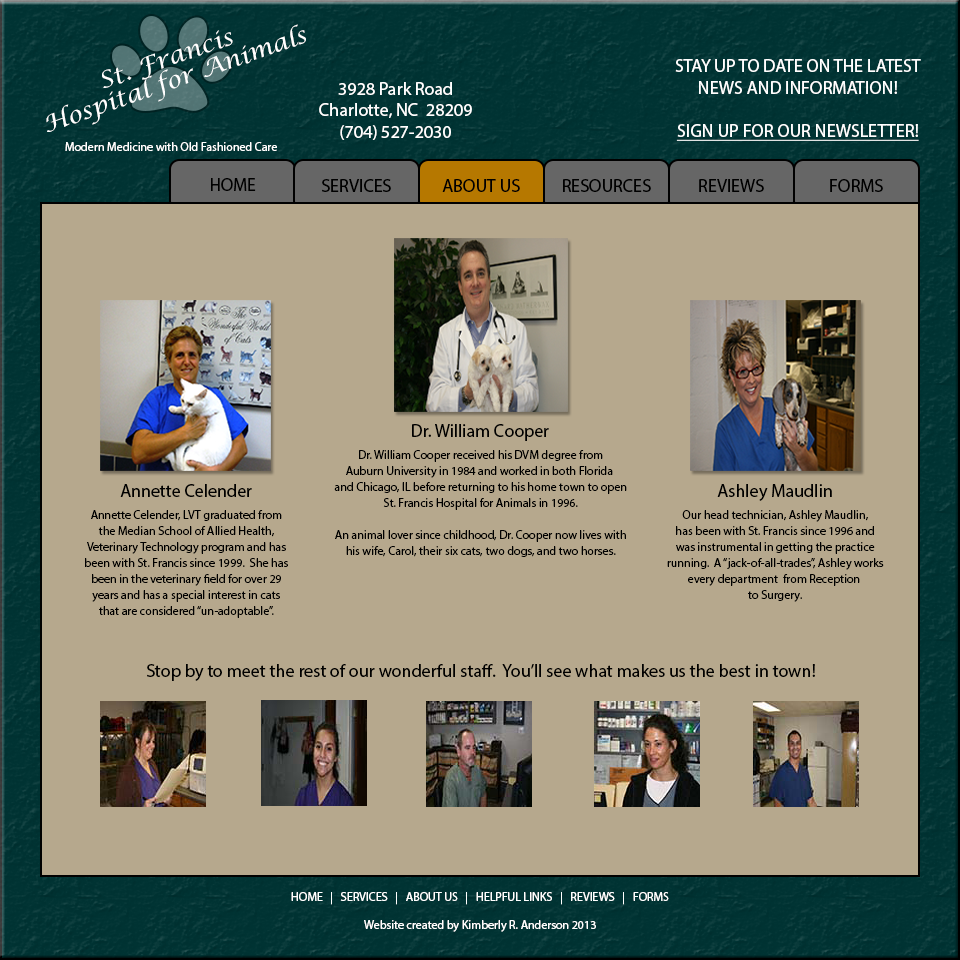
<style>
.page{position:relative;width:960px;height:960px;background:#b6a88d}
.page>*{position:absolute;margin:0}
.t1{font:22.9px/22.9px "LucidaCalligraphy-Italic";color:#ffffff;scale:1.07 1}
.t2{font:18px "MyriadPro-Regular";color:#ffffff}
.t3{font:18px "MyriadPro-Regular";color:#ffffff;text-decoration:underline}
.t4{font:12px "MyriadPro-Regular";color:#ffffff}
.t5{font:18px "MyriadPro-Regular";color:#000000}
.t6{font:12px/16px "MyriadPro-Regular";color:#000000}
</style>
<div class="page">
<p class="t1" style="left:46px;top:24px;width:260px;height:108px;text-align:center;rotate:-19deg">St. Francis<br>Hospital for Animals</p>
<p class="t2" style="left:675px;top:59px;width:246px;height:82px;text-align:center">STAY UP TO DATE ON THE LATEST<br>NEWS AND INFORMATION!<br><br><span class="t3">SIGN UP FOR OUR NEWSLETTER!</span></p>
<p class="t2" style="left:319px;top:82px;width:153px;height:58px;text-align:center">3928 Park Road<br>Charlotte, NC  28209<br>(704) 527-2030</p>
<p class="t4" style="left:65px;top:142px;width:212px;height:9px">Modern Medicine with Old Fashioned Care</p>
<p class="t5" style="left:211px;top:178px;width:45px;height:13px">HOME</p>
<p class="t5" style="left:322px;top:179px;width:69px;height:13px">SERVICES</p>
<p class="t5" style="left:442px;top:179px;width:78px;height:13px">ABOUT US</p>
<p class="t5" style="left:563px;top:179px;width:88px;height:13px">RESOURCES</p>
<p class="t5" style="left:699px;top:179px;width:65px;height:13px">REVIEWS</p>
<p class="t5" style="left:830px;top:179px;width:53px;height:13px">FORMS</p>
<p class="t5" style="left:412px;top:424px;width:137px;height:17px">Dr. William Cooper</p>
<p class="t6" style="left:334px;top:450px;width:293px;height:107px;text-align:center">Dr. William Cooper received his DVM degree from<br>Auburn University in 1984 and worked in both Florida <br>and Chicago, IL before returning to his home town to open<br>St. Francis Hospital for Animals in 1996.<br><br>An animal lover since childhood, Dr. Cooper now lives with<br>his wife, Carol, their six cats, two dogs, and two horses.</p>
<p class="t5" style="left:120px;top:484px;width:132px;height:13px">Annette Celender</p>
<p class="t5" style="left:717px;top:484px;width:115px;height:17px">Ashley Maudlin</p>
<p class="t6" style="left:85px;top:510px;width:203px;height:108px;text-align:center">Annette Celender, LVT graduated from<br>the Median School of Allied Health,<br>Veterinary Technology program and has<br>been with St. Francis since 1999.  She has<br>been in the veterinary field for over 29<br>years and has a special interest in cats<br>that are considered “un-adoptable”.</p>
<p class="t6" style="left:667px;top:510px;width:217px;height:92px;text-align:center">Our head technician, Ashley Maudlin,<br>has been with St. Francis since 1996 and<br>was instrumental in getting the practice<br>running.  A “jack-of-all-trades”, Ashley works<br>every department  from Reception <br>to Surgery.</p>
<p class="t5" style="left:147px;top:664px;width:668px;height:17px">Stop by to meet the rest of our wonderful staff.  You’ll see what makes us the best in town!</p>
<p class="t4" style="left:291px;top:892px;width:378px;height:13px">HOME   |   SERVICES   |   ABOUT US   |   HELPFUL LINKS   |   REVIEWS   |   FORMS</p>
<p class="t4" style="left:364px;top:920px;width:232px;height:12px">Website created by Kimberly R. Anderson 2013</p>
</div>
